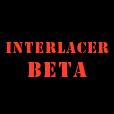
<style>
.page{position:relative;width:114px;height:114px;background:#000000}
.page>*{position:absolute;margin:0}
.t1{font:14px "StencilStd";letter-spacing:0.075em;color:#ff3f29}
.t2{font:20px "StencilStd";letter-spacing:0.075em;color:#ff3f29}
</style>
<div class="page">
<p class="t1" style="left:6px;top:42px;width:103px;height:35px;text-align:center">INTERLACER<br><span class="t2">BETA</span></p>
</div>
